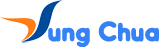
<style>
.page{position:relative;width:160px;height:47px;background:#ffffff}
.page>*{position:absolute;margin:0}
.t1{font:26.1px "Hiruko-BlackAlternate";color:#3482f6}
</style>
<div class="page">
<p class="t1" style="left:48px;top:21px;width:111px;height:27px">ung Chua</p>
</div>
